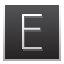
<style>
.page{position:relative;width:64px;height:64px}
.page>*{position:absolute;margin:0}
.t1{font:48px "Sawasdee"}
</style>
<div class="page">
<p class="t1" style="left:22px;top:14px;width:20px;height:35px">E</p>
</div>
